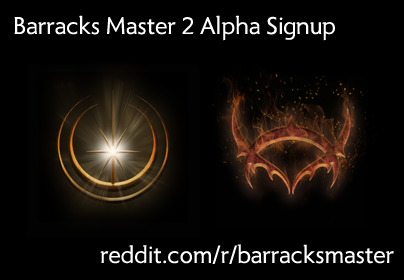
<style>
.page{position:relative;width:404px;height:280px;background:#000000}
.page>*{position:absolute;margin:0}
.t1{font:25px "Radiance";color:#fefefe}
</style>
<div class="page">
<p class="t1" style="left:14px;top:15px;width:321px;height:26px">Barracks Master 2 Alpha Signup</p>
<p class="t1" style="left:100px;top:244px;width:294px;height:20px">reddit.com/r/barracksmaster</p>
</div>
